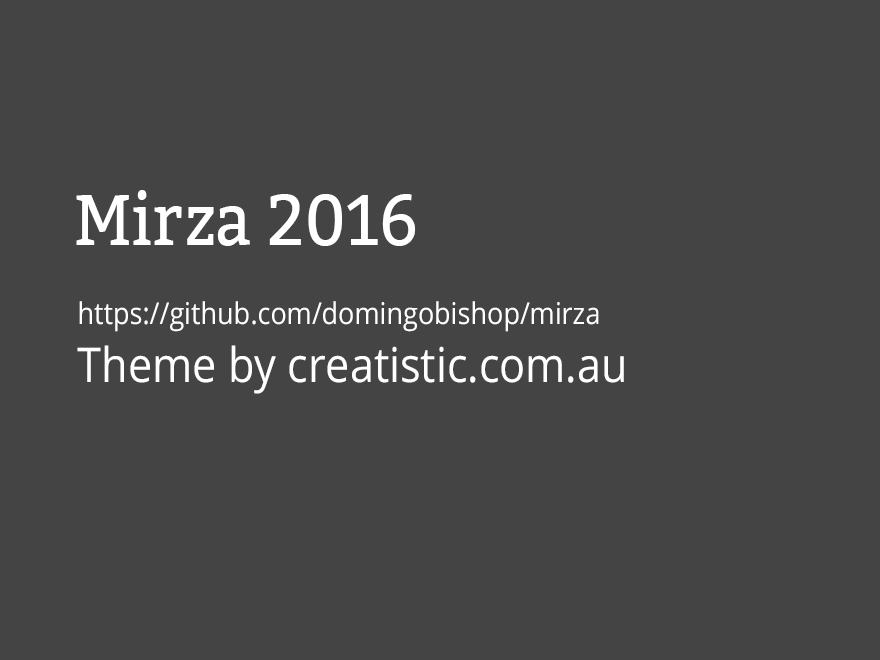
<style>
.page{position:relative;width:880px;height:660px;background:#444444}
.page>*{position:absolute;margin:0}
.t1{font:72px "Bitter-Regular";color:#ffffff;scale:0.9 1}
.t2{font:30px "OpenSans";color:#ffffff;scale:0.9 1}
.t3{font:48px "OpenSans";color:#ffffff;scale:0.9 1}
</style>
<div class="page">
<p class="t1" style="left:76px;top:190px;width:340px;height:56px">Mirza 2016</p>
<p class="t2" style="left:77px;top:301px;width:547px;height:93px">https://github.com/domingobishop/mirza<br><span class="t3">Theme by creatistic.com.au</span></p>
</div>
